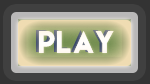
<style>
.page{position:relative;width:150px;height:84px;background:#404040}
.page>*{position:absolute;margin:0}
.t1{font:28px "LemonMilk";letter-spacing:0.05em;color:#ffffff}
</style>
<div class="page">
<p class="t1" style="left:39px;top:31px;width:75px;height:22px">Play</p>
<p class="t1" style="left:39px;top:31px;width:75px;height:22px">Play</p>
</div>
